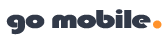
<style>
.page{position:relative;width:164px;height:35px;background:#ffffff}
.page>*{position:absolute;margin:0}
.t1{font:26.6px "Bauhaus93";letter-spacing:-0.05em;color:#323a49;scale:1.35 1}
</style>
<div class="page">
<p class="t1" style="left:6px;top:9px;width:145px;height:26px">go mobile</p>
</div>
